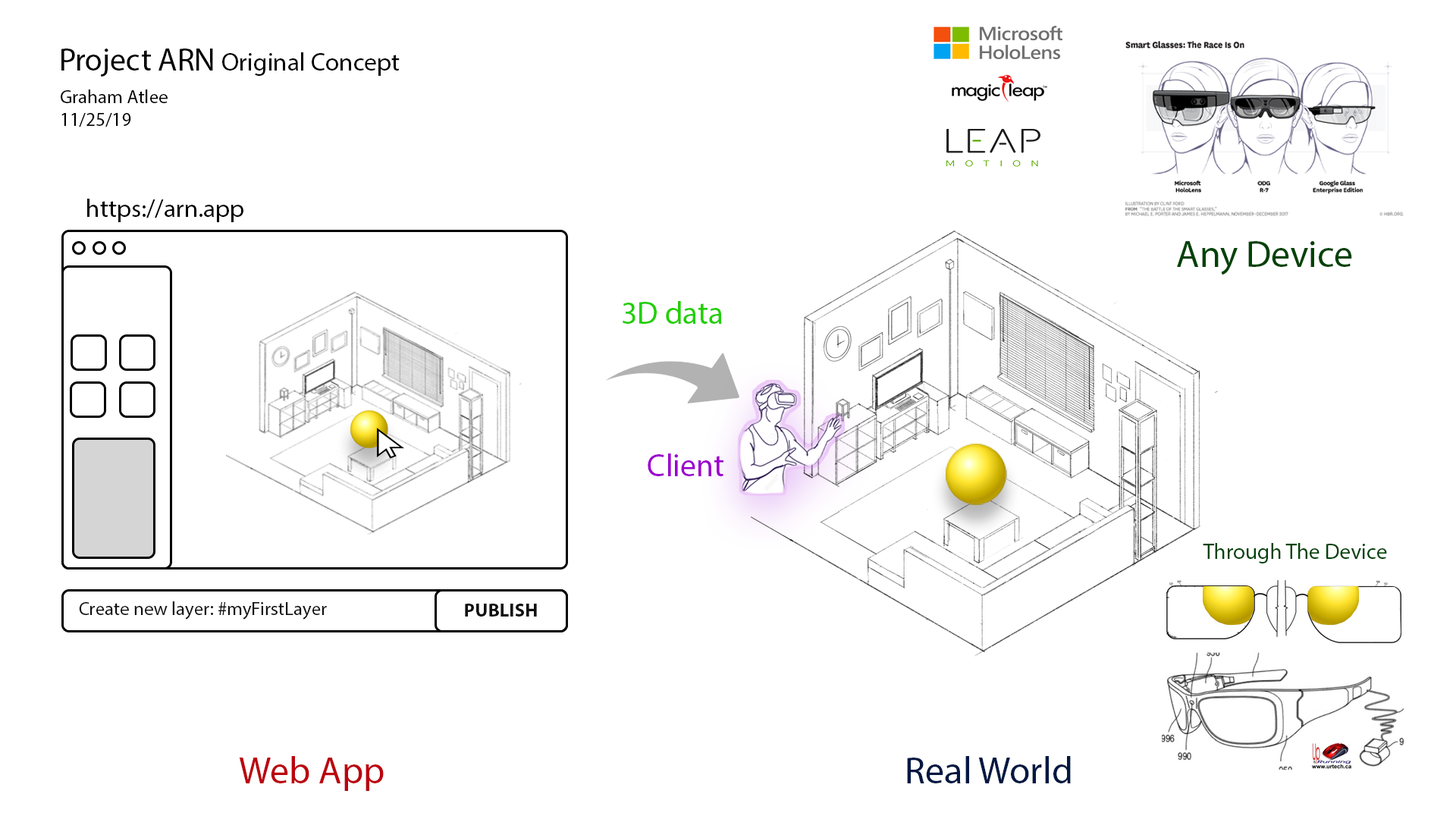
<style>
.page{position:relative;width:1456px;height:819px;background:#ffffff}
.page>*{position:absolute;margin:0}
.t1{font:25.3px "MyriadPro-Regular";color:#000000}
.t2{font:31.6px "MyriadPro-Regular";color:#000000}
.t3{font:19px "MyriadPro-Regular";color:#000000}
.t4{font:37.9px "MyriadPro-Regular";color:#004205}
.t5{font:31.6px "MyriadPro-Regular";color:#22cf00}
.t6{font:31.6px "MyriadPro-Regular";color:#9c00cf}
.t7{font:22.1px "MyriadPro-Regular";color:#004205}
.t8{font:19px "MyriadPro-Regular";color:#101010}
.t9{font:19px "MyriadPro-Bold";color:#101010}
.t10{font:37.9px "MyriadPro-Regular";color:#bb0310}
.t11{font:37.9px "MyriadPro-Regular";color:#001742}
</style>
<div class="page">
<p class="t1" style="left:61px;top:49px;width:339px;height:28px"><span class="t2">Project ARN </span>Original Concept</p>
<p class="t3" style="left:61px;top:89px;width:107px;height:38px">Graham Atlee<br>11/25/19</p>
<p class="t1" style="left:87px;top:199px;width:156px;height:23px">https://arn.app</p>
<p class="t4" style="left:1177px;top:241px;width:175px;height:34px">Any Device</p>
<p class="t5" style="left:623px;top:301px;width:99px;height:23px">3D data</p>
<p class="t6" style="left:648px;top:453px;width:75px;height:23px">Client</p>
<p class="t7" style="left:1203px;top:543px;width:184px;height:20px">Through The Device</p>
<p class="t8" style="left:79px;top:601px;width:248px;height:19px">Create new layer: #myFirstLayer</p>
<p class="t9" style="left:465px;top:604px;width:72px;height:13px">PUBLISH</p>
<p class="t10" style="left:239px;top:756px;width:145px;height:35px">Web App</p>
<p class="t11" style="left:907px;top:756px;width:164px;height:27px">Real World</p>
</div>
